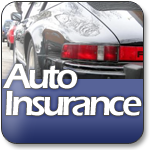
<style>
.page{position:relative;width:150px;height:150px}
.page>*{position:absolute;margin:0}
.t1{font:36px/14.2px "ErasITC-Demi";letter-spacing:-0.1em;color:#ffffff}
</style>
<div class="page">
<p class="t1" style="left:3px;top:64px;width:139px;height:52px">Auto<br>Insurance</p>
</div>
